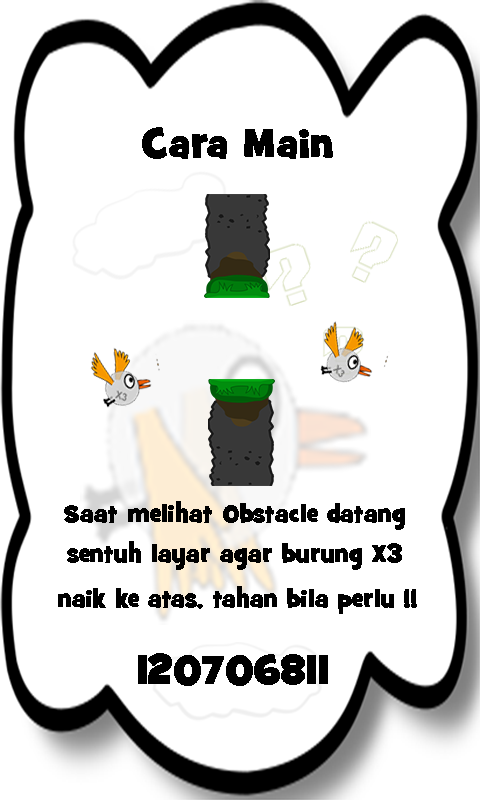
<style>
.page{position:relative;width:480px;height:800px;background:#ffffff}
.page>*{position:absolute;margin:0}
.t1{font:41.4px "GrilledCheeseBTNToasted";color:#000000}
.t2{font:24.9px "GrilledCheeseBTNToasted";color:#000000}
</style>
<div class="page">
<p class="t1" style="left:142px;top:127px;width:191px;height:32px">Cara Main</p>
<p class="t2" style="left:64px;top:501px;width:341px;height:29px">Saat melihat Obstacle datang</p>
<p class="t2" style="left:67px;top:541px;width:335px;height:29px">sentuh layar agar burung X3</p>
<p class="t2" style="left:58px;top:586px;width:359px;height:28px">naik ke atas, tahan bila perlu !!</p>
<p class="t1" style="left:138px;top:653px;width:190px;height:33px">120706811</p>
</div>
